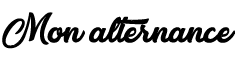
<style>
.page{position:relative;width:242px;height:57px;background:#ffffff}
.page>*{position:absolute;margin:0}
.t1{font:48px "Atlantic-Bentley";color:#000000}
</style>
<div class="page">
<p class="t1" style="left:2px;top:12px;width:233px;height:37px">Mon alternance</p>
</div>
